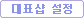
<style>
.page{position:relative;width:84px;height:18px;background:#fefefe}
.page>*{position:absolute;margin:0}
.t1{font:12px "morris9";color:#8b93eb;font-weight:bold}
</style>
<div class="page">
<p class="t1" style="left:12px;top:4px;width:60px;height:10px">대표샵 설정</p>
</div>
